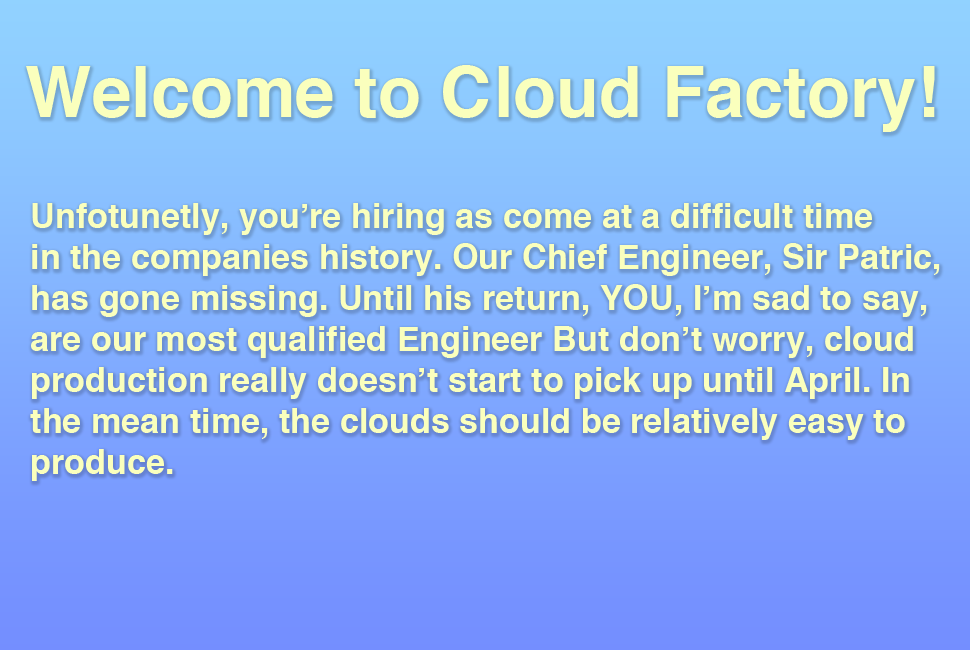
<style>
.page{position:relative;width:970px;height:650px}
.page>*{position:absolute;margin:0}
.t1{font:70.4px "Helvetica-Bold";color:#faffbd}
.t2{font:34.2px "Helvetica-Bold";color:#faffbd}
</style>
<div class="page">
<p class="t1" style="left:26px;top:65px;width:909px;height:67px">Welcome to Cloud Factory!</p>
<p class="t2" style="left:30px;top:203px;width:910px;height:278px">Unfotunetly, you’re hiring as come at a difficult time <br>in the companies history. Our Chief Engineer, Sir Patric, <br>has gone missing. Until his return, YOU, I’m sad to say, <br>are our most qualified Engineer But don’t worry, cloud <br>production really doesn’t start to pick up until April. In <br>the mean time, the clouds should be relatively easy to <br>produce.</p>
</div>
